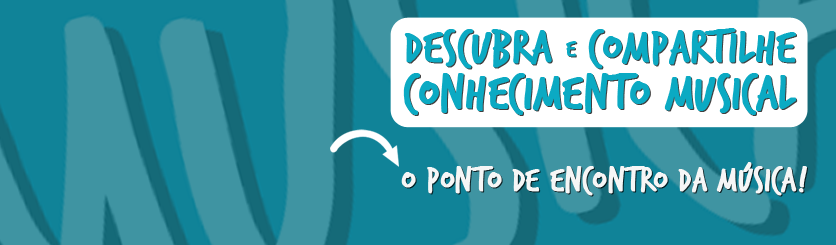
<style>
.page{position:relative;width:836px;height:245px;background:#108398}
.page>*{position:absolute;margin:0}
.t1{font:49.2px "TrashHand";color:#0baac3;font-weight:bold}
.t2{font:25px "TrashHand";color:#0baac3;font-weight:bold}
.t3{font:51.7px "TrashHand";color:#0baac3;font-weight:bold}
.t4{font:36.2px "TrashHand";color:#f6f6f6;font-weight:bold}
</style>
<div class="page">
<p class="t1" style="left:404px;top:29px;width:148px;height:40px">Descubra</p>
<p class="t1" style="left:588px;top:28px;width:208px;height:41px">Compartilhe</p>
<p class="t2" style="left:566px;top:41px;width:11px;height:16px">e</p>
<p class="t3" style="left:403px;top:73px;width:394px;height:42px">conhecimento musical</p>
<p class="t4" style="left:401px;top:162px;width:406px;height:34px">O ponto de encontro da música!</p>
</div>
